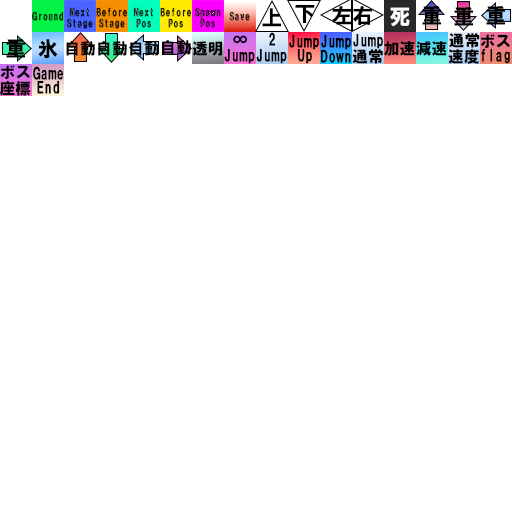
<style>
.page{position:relative;width:512px;height:512px;background:#ffffff}
.page>*{position:absolute;margin:0}
.t1{font:20.8px "HGSoeiKakugothicUB";color:#000000}
.t2{font:10.6px "HGSoeiKakugothicUB";color:#222222}
.t3{font:10.6px/10.6px "HGSoeiKakugothicUB";color:#333333}
.t4{font:10.6px/10.6px "HGSoeiKakugothicUB";color:#222222}
.t5{font:10.6px/10.6px "HGSoeiKakugothicUB"}
.t6{font:10.6px "HGSoeiKakugothicUB"}
.t7{font:20.8px "HGSoeiKakugothicUB";color:#ffffff}
.t8{font:15.8px "HGSoeiKakugothicUB";color:#000000}
</style>
<div class="page">
<p class="t1" style="left:295px;top:4px;width:20px;height:20px">下</p>
<p class="t1" style="left:332px;top:6px;width:20px;height:19px">左</p>
<p class="t1" style="left:353px;top:6px;width:20px;height:20px">右</p>
<p class="t1" style="left:422px;top:5px;width:20px;height:20px">重</p>
<p class="t1" style="left:454px;top:6px;width:20px;height:20px">重</p>
<p class="t1" style="left:486px;top:5px;width:20px;height:20px">重</p>
<p class="t2" style="left:32px;top:11px;width:32px;height:10px">Ground</p>
<p class="t3" style="left:67px;top:7px;width:26px;height:22px;text-align:center">Next<br>Stage</p>
<p class="t4" style="left:96px;top:7px;width:32px;height:22px;text-align:center">Before<br>Stage</p>
<p class="t5" style="left:133px;top:7px;width:20px;height:21px;text-align:center">Next<br>Pos</p>
<p class="t4" style="left:160px;top:7px;width:32px;height:21px;text-align:center">Before<br>Pos</p>
<p class="t5" style="left:195px;top:7px;width:26px;height:21px;text-align:center">Spawn<br>Pos</p>
<p class="t6" style="left:229px;top:11px;width:21px;height:10px">Save</p>
<p class="t1" style="left:262px;top:8px;width:20px;height:19px">上</p>
<p class="t7" style="left:390px;top:7px;width:20px;height:20px">死</p>
<p class="t1" style="left:6px;top:38px;width:20px;height:20px">重</p>
<p class="t1" style="left:38px;top:39px;width:20px;height:20px">氷</p>
<p class="t8" style="left:66px;top:41px;width:29px;height:15px">自動</p>
<p class="t8" style="left:98px;top:41px;width:29px;height:15px">自動</p>
<p class="t8" style="left:130px;top:41px;width:29px;height:15px">自動</p>
<p class="t8" style="left:162px;top:40px;width:29px;height:15px">自動</p>
<p class="t8" style="left:192px;top:41px;width:31px;height:15px">透明</p>
<p class="t8" style="left:233px;top:35px;width:15px;height:9px">∞</p>
<p class="t8" style="left:269px;top:32px;width:7px;height:14px">2</p>
<p class="t8" style="left:289px;top:34px;width:31px;height:16px">Jump</p>
<p class="t8" style="left:321px;top:34px;width:31px;height:16px">Jump</p>
<p class="t8" style="left:353px;top:33px;width:31px;height:16px">Jump</p>
<p class="t8" style="left:384px;top:41px;width:31px;height:15px">加速</p>
<p class="t8" style="left:416px;top:41px;width:31px;height:15px">減速</p>
<p class="t8" style="left:449px;top:33px;width:31px;height:15px">通常</p>
<p class="t8" style="left:480px;top:34px;width:30px;height:15px">ボス</p>
<p class="t8" style="left:224px;top:48px;width:31px;height:16px">Jump</p>
<p class="t8" style="left:256px;top:48px;width:31px;height:16px">Jump</p>
<p class="t8" style="left:297px;top:48px;width:16px;height:16px">Up</p>
<p class="t8" style="left:320px;top:49px;width:31px;height:14px">Down</p>
<p class="t8" style="left:352px;top:49px;width:31px;height:15px">通常</p>
<p class="t8" style="left:448px;top:49px;width:31px;height:15px">速度</p>
<p class="t8" style="left:481px;top:48px;width:29px;height:16px">flag</p>
<p class="t8" style="left:0px;top:65px;width:30px;height:15px">ボス</p>
<p class="t8" style="left:33px;top:66px;width:31px;height:14px">Game</p>
<p class="t8" style="left:0px;top:80px;width:31px;height:16px">座標</p>
<p class="t8" style="left:37px;top:80px;width:23px;height:14px">End</p>
</div>
